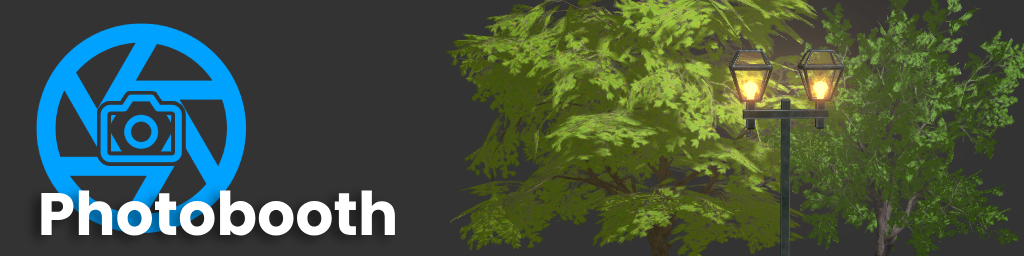
<style>
.page{position:relative;width:1024px;height:256px;background:#333333}
.page>*{position:absolute;margin:0}
.t1{font:60px "Poppins-Bold";color:#ffffff}
</style>
<div class="page">
<p class="t1" style="left:41px;top:190px;width:354px;height:46px">Photobooth</p>
</div>
